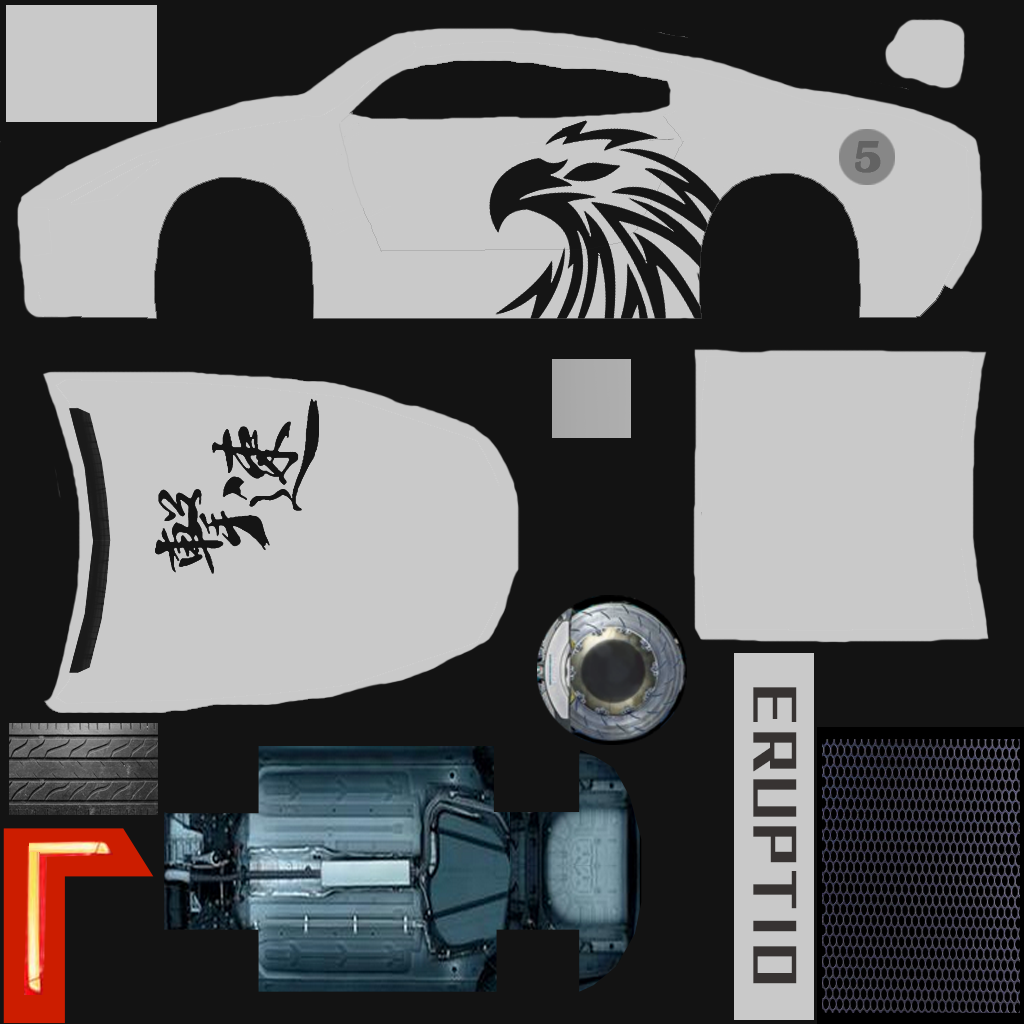
<style>
.page{position:relative;width:1024px;height:1024px;background:#131313}
.page>*{position:absolute;margin:0}
.t1{font:57.9px "BigruixianBoldkGBV1.0";color:#373332;font-weight:bold}
</style>
<div class="page">
<p class="t1" style="left:753px;top:687px;width:44px;height:297px;rotate:90deg">ERUPTIO</p>
</div>
